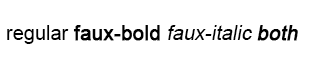
<style>
.page{position:relative;width:320px;height:64px;background:#ffffff}
.page>*{position:absolute;margin:0}
.t1{font:20px "ArialMT";color:#000000;font-style:italic}
.t2{font:20px "ArialMT";color:#000000}
.t3{font:20px "ArialMT";color:#000000;font-weight:bold}
.t4{font:20px "ArialMT";color:#000000;font-weight:bold;font-style:italic}
</style>
<div class="page">
<p class="t1" style="left:7px;top:25px;width:291px;height:19px"><span class="t2">regular </span><span class="t3">faux-bold </span>faux-italic <span class="t4">both</span></p>
</div>
